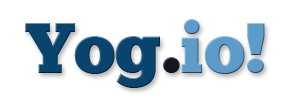
<style>
.page{position:relative;width:300px;height:100px;background:#ffffff}
.page>*{position:absolute;margin:0}
.t1{font:72px "ChunkFive";color:#09446f}
.t2{font:72px "ChunkFive";color:#13181e}
.t3{font:72px "ChunkFive";color:#5d9bc9}
</style>
<div class="page">
<p class="t1" style="left:25px;top:19px;width:240px;height:69px">Yog<span class="t2">.</span><span class="t3">io!</span></p>
</div>
